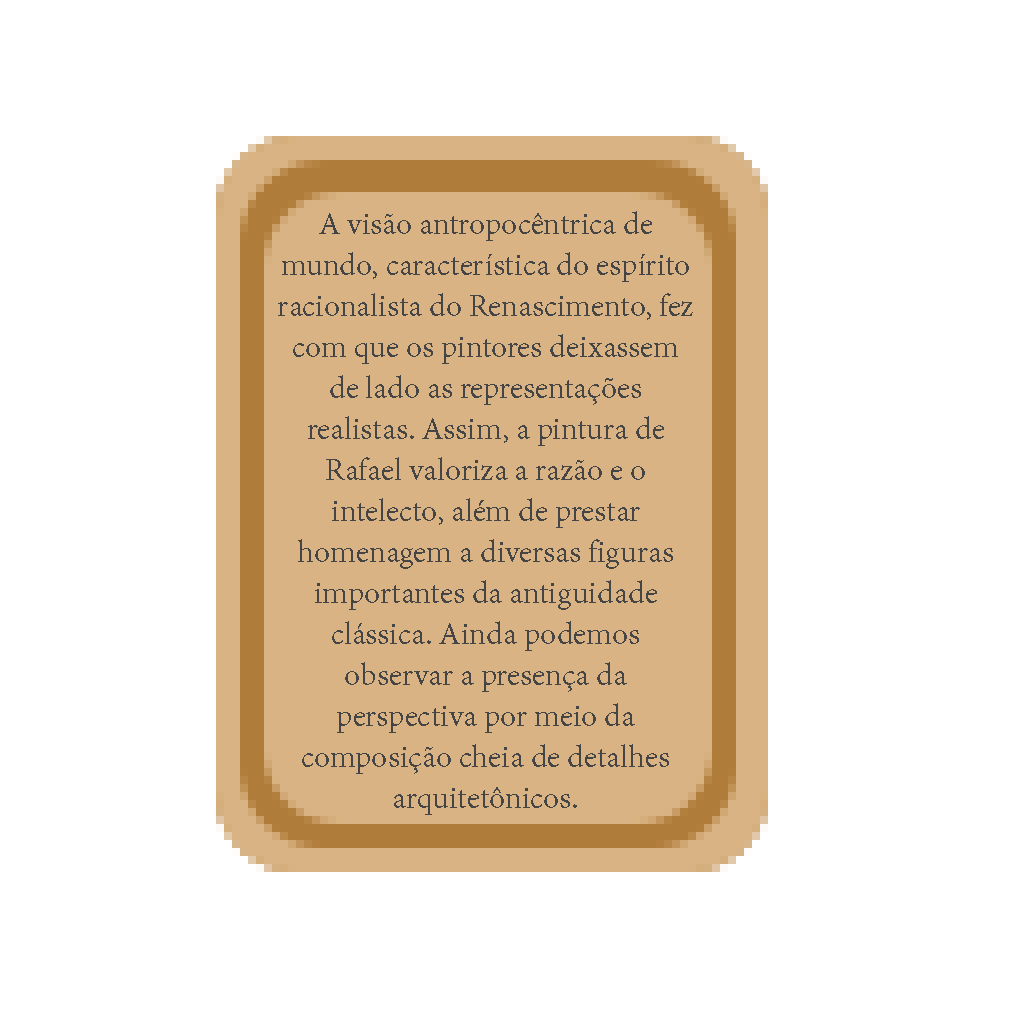
<style>
.page{position:relative;width:1024px;height:1024px;background:#ffffff}
.page>*{position:absolute;margin:0}
.t1{font:34.2px "AdobeDevanagari-Regular";color:#454545}
</style>
<div class="page">
<p class="t1" style="left:278px;top:211px;width:415px;height:604px;text-align:center">A visão antropocêntrica de mundo, característica do espírito racionalista do Renascimento, fez com que os pintores deixassem de lado as representações realistas. Assim, a pintura de Rafael valoriza a razão e o intelecto, além de prestar homenagem a diversas figuras importantes da antiguidade clássica. Ainda podemos observar a presença da perspectiva por meio da composição cheia de detalhes arquitetônicos.</p>
</div>
